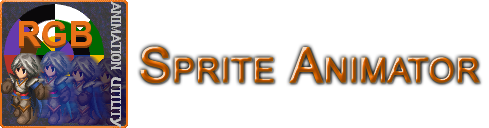
<style>
.page{position:relative;width:489px;height:128px;background:#ffffff}
.page>*{position:absolute;margin:0}
.t1{font:48px "ArialMT";font-variant:small-caps;font-weight:bold}
</style>
<div class="page">
<p class="t1" style="left:140px;top:46px;width:340px;height:37px">Sprite Animator</p>
</div>
